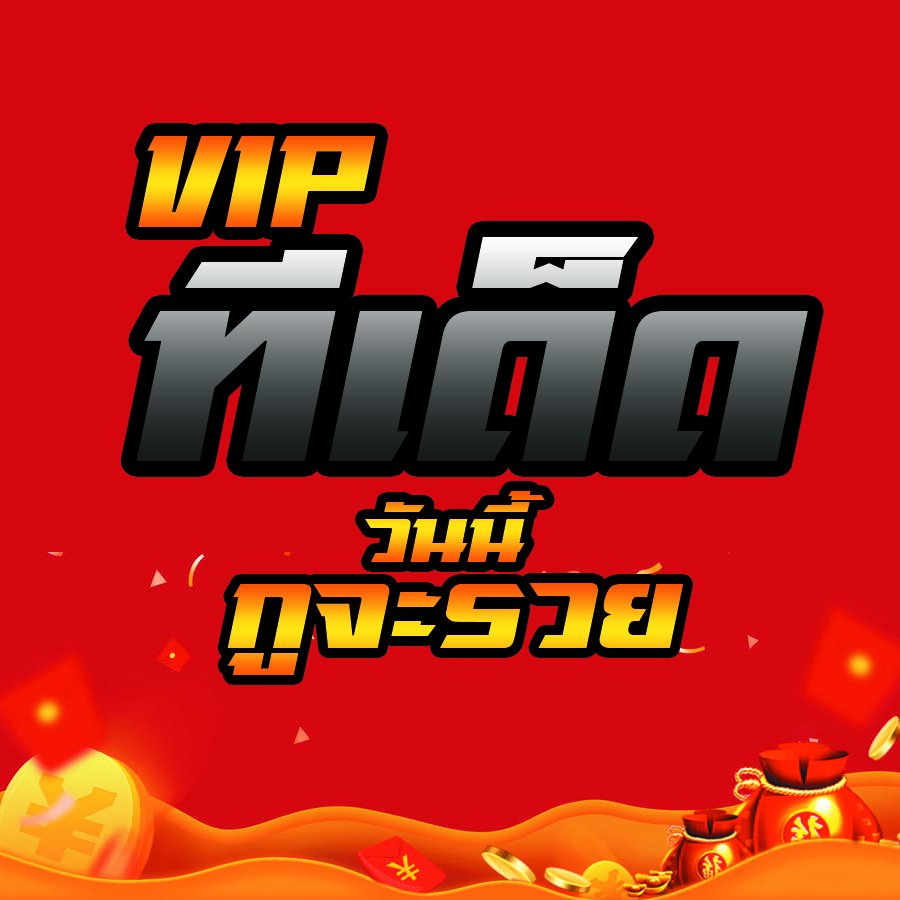
<style>
.page{position:relative;width:900px;height:900px;background:#d5060e}
.page>*{position:absolute;margin:0}
.t1{font:150px "sdrangverV.1-Regular"}
.t2{font:350px "sdrangverV.1-Regular"}
.t3{font:100px "sdrangverV.1-Regular"}
</style>
<div class="page">
<p class="t1" style="left:138px;top:136px;width:238px;height:91px">VIP</p>
<p class="t2" style="left:136px;top:236px;width:672px;height:225px">ทีเด็ด</p>
<p class="t3" style="left:364px;top:491px;width:181px;height:71px">วันนี้</p>
<p class="t1" style="left:227px;top:583px;width:457px;height:92px">กูจะรวย</p>
</div>
